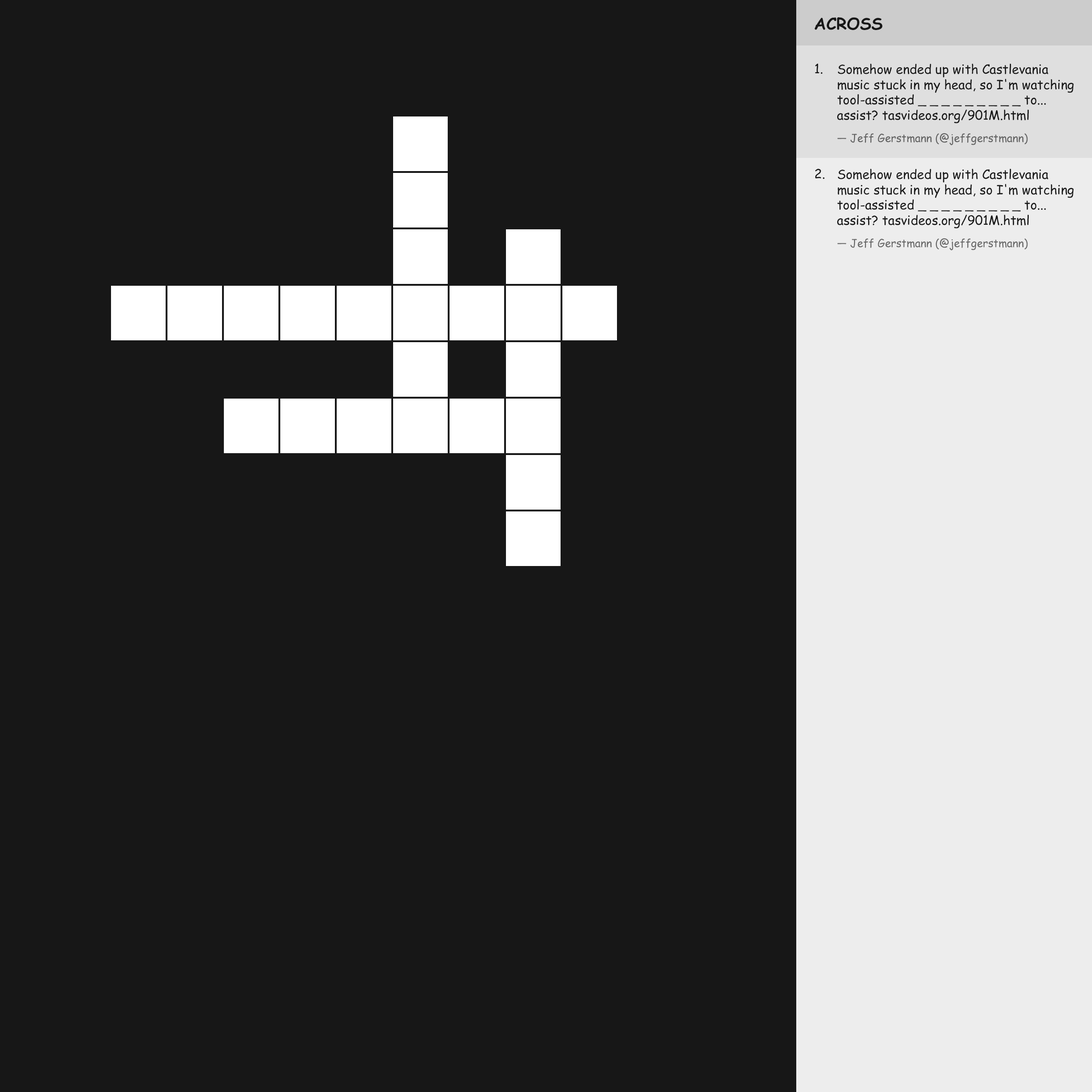
<style>
.page{position:relative;width:1092px;height:1092px;background:#171717}
.page>*{position:absolute;margin:0}
.t1{font:16.4px "ComicSansMS-Bold";color:#171717}
.t2{font:12.7px "ComicSansMS";color:#171717}
.t3{font:5.5px "MyriadPro-Regular";color:#000000}
</style>
<div class="page">
<p class="t1" style="left:814px;top:17px;width:69px;height:13px">ACROSS</p>
<p class="t2" style="left:815px;top:63px;width:8px;height:11px">1.</p>
<p class="t2" style="left:837px;top:64px;width:237px;height:81px">Somehow ended up with Castlevania music stuck in my head, so I'm watching tool-assisted _ _ _ _ _ _ _ _ _ to... assist? tasvideos.org/901M.html<br><span class="t3">— Jeff Gerstmann (@jeffgerstmann)</span></p>
<p class="t2" style="left:815px;top:169px;width:9px;height:10px">2.</p>
<p class="t2" style="left:837px;top:169px;width:237px;height:81px">Somehow ended up with Castlevania music stuck in my head, so I'm watching tool-assisted _ _ _ _ _ _ _ _ _ to... assist? tasvideos.org/901M.html<br><span class="t3">— Jeff Gerstmann (@jeffgerstmann)</span></p>
</div>
